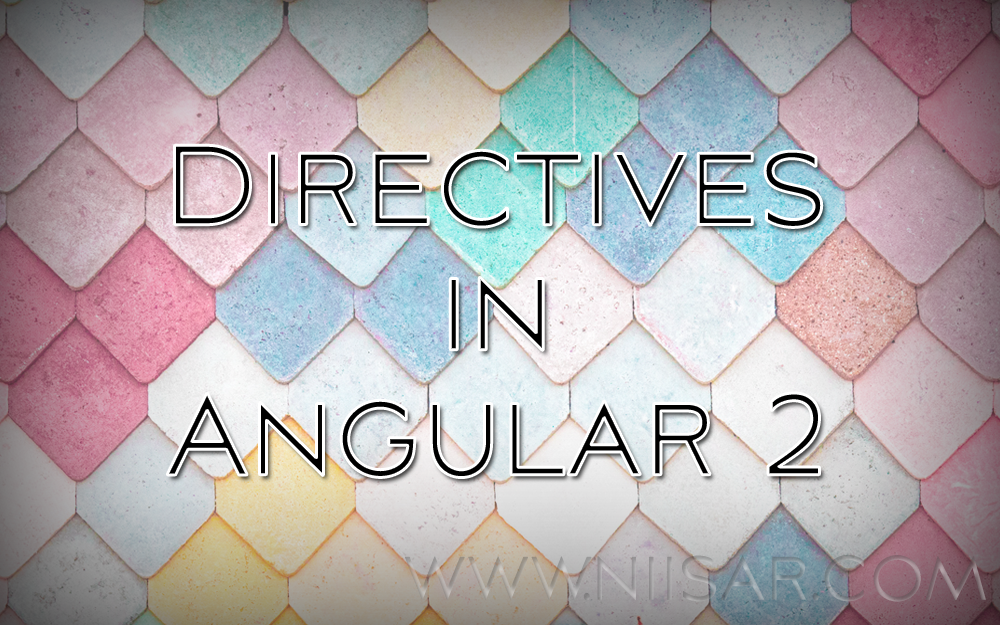
<style>
.page{position:relative;width:1000px;height:625px}
.page>*{position:absolute;margin:0}
.t1{font:140.1px/125.1px "AvianoSansLight";font-weight:bold;scale:0.76 1}
</style>
<div class="page">
<p class="t1" style="left:167px;top:145px;width:655px;height:333px;text-align:center">Directives<br>in<br>Angular 2</p>
</div>
